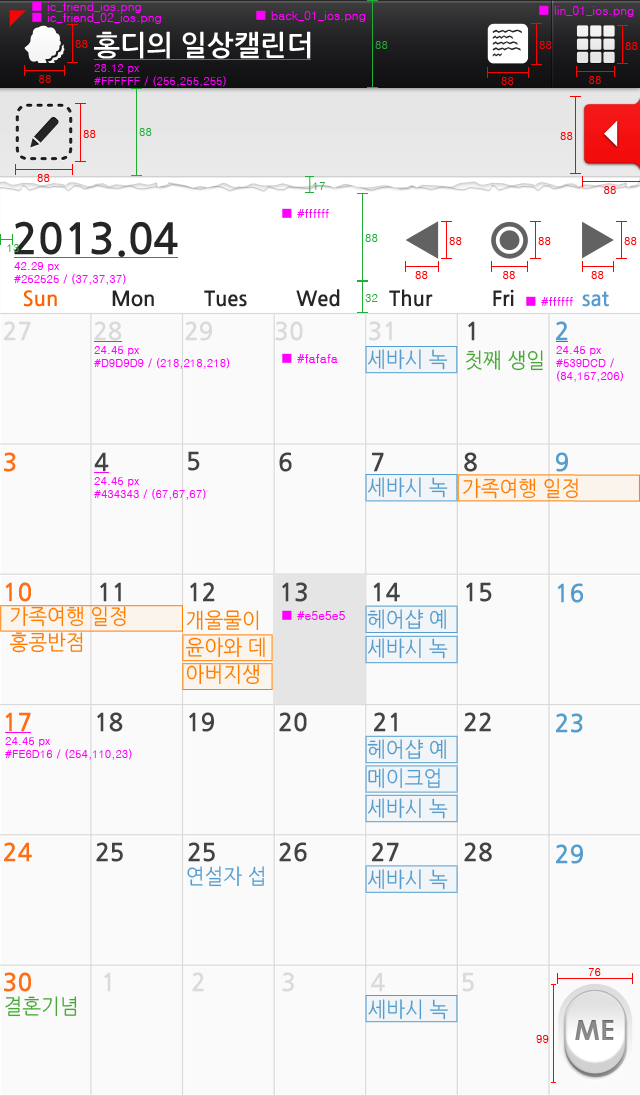
<style>
.page{position:relative;width:640px;height:1096px;background:#fafafa}
.page>*{position:absolute;margin:0}
.t1{font:12px "Dotum";color:#ff00ff}
.t2{font:11px "Dotum";color:#ff0000}
.t3{font:28.1px "NanumGothicBold";color:#ffffff}
.t4{font:11px "Dotum";color:#22ac38}
.t5{font:11px "Dotum";color:#ff00ff}
.t6{font:42.3px "NanumGothicBold";color:#252525}
.t7{font:20.4px "NanumGothicBold";color:#ff6000}
.t8{font:20.4px "NanumGothicBold";color:#252525}
.t9{font:20.4px "NanumGothicBold";color:#549dce}
.t10{font:24.4px "NanumGothicBold";color:#dadada}
.t11{font:24.4px "NanumGothicBold";color:#434343}
.t12{font:24.4px "NanumGothicBold";color:#549dce}
.t13{font:21px "NanumGothic";color:#549dce;scale:0.95 1}
.t14{font:21.1px "NanumGothic";color:#48a837;scale:0.95 1}
.t15{font:24.4px "NanumGothicBold";color:#fe6e17}
.t16{font:21.1px "NanumGothic";color:#ff7d00;scale:0.95 1}
.t17{font:21.1px/25.5px "NanumGothic";color:#ff7d00;scale:0.95 1}
.t18{font:21.1px/27px "NanumGothic";color:#ff7d00;scale:0.95 1}
.t19{font:21.1px/29.3px "NanumGothic";color:#549dce;scale:0.95 1}
.t20{font:21.1px "NanumGothic";color:#549dce;scale:0.95 1}
.t21{font:27.5px "CenturyGothic-Bold";letter-spacing:0.02em;color:#878787}
</style>
<div class="page">
<p class="t1" style="left:47px;top:2px;width:94px;height:11px">ic_friend_ios.png</p>
<p class="t1" style="left:554px;top:6px;width:80px;height:11px">lin_01_ios.png</p>
<p class="t1" style="left:47px;top:13px;width:114px;height:11px">ic_friend_02_ios.png</p>
<p class="t1" style="left:271px;top:11px;width:95px;height:11px">back_01_ios.png</p>
<p class="t2" style="left:75px;top:40px;width:13px;height:8px">88</p>
<p class="t3" style="left:94px;top:31px;width:217px;height:28px">홍디의 일상캘린더</p>
<p class="t4" style="left:375px;top:41px;width:13px;height:8px">88</p>
<p class="t2" style="left:539px;top:41px;width:13px;height:8px">88</p>
<p class="t2" style="left:625px;top:42px;width:13px;height:8px">88</p>
<p class="t5" style="left:94px;top:64px;width:132px;height:23px">28.12 px<br>#FFFFFF / (255,255,255)</p>
<p class="t2" style="left:39px;top:75px;width:12px;height:8px">88</p>
<p class="t2" style="left:501px;top:77px;width:13px;height:8px">88</p>
<p class="t2" style="left:589px;top:76px;width:12px;height:8px">88</p>
<p class="t2" style="left:83px;top:130px;width:13px;height:8px">88</p>
<p class="t4" style="left:139px;top:128px;width:13px;height:8px">88</p>
<p class="t2" style="left:560px;top:132px;width:13px;height:8px">88</p>
<p class="t2" style="left:37px;top:174px;width:13px;height:8px">88</p>
<p class="t4" style="left:313px;top:182px;width:12px;height:8px">17</p>
<p class="t2" style="left:604px;top:186px;width:12px;height:8px">88</p>
<p class="t1" style="left:297px;top:209px;width:32px;height:9px">#ffffff</p>
<p class="t6" style="left:14px;top:221px;width:164px;height:36px">2013.04</p>
<p class="t4" style="left:7px;top:244px;width:12px;height:8px">13</p>
<p class="t4" style="left:365px;top:234px;width:13px;height:8px">88</p>
<p class="t2" style="left:449px;top:237px;width:13px;height:8px">88</p>
<p class="t2" style="left:538px;top:237px;width:13px;height:8px">88</p>
<p class="t2" style="left:624px;top:237px;width:13px;height:8px">88</p>
<p class="t5" style="left:14px;top:262px;width:112px;height:23px">42.29 px<br>#252525 / (37,37,37)</p>
<p class="t2" style="left:415px;top:271px;width:13px;height:8px">88</p>
<p class="t2" style="left:503px;top:271px;width:12px;height:8px">88</p>
<p class="t2" style="left:591px;top:271px;width:13px;height:8px">88</p>
<p class="t7" style="left:24px;top:290px;width:33px;height:17px">Sun</p>
<p class="t8" style="left:112px;top:290px;width:42px;height:17px">Mon</p>
<p class="t8" style="left:204px;top:290px;width:43px;height:17px">Tues</p>
<p class="t8" style="left:296px;top:289px;width:44px;height:18px">Wed</p>
<p class="t4" style="left:365px;top:294px;width:13px;height:8px">32</p>
<p class="t8" style="left:389px;top:289px;width:44px;height:18px">Thur</p>
<p class="t8" style="left:493px;top:289px;width:21px;height:17px">Fri</p>
<p class="t9" style="left:582px;top:291px;width:27px;height:16px">sat</p>
<p class="t1" style="left:541px;top:297px;width:32px;height:9px">#ffffff</p>
<p class="t10" style="left:4px;top:321px;width:27px;height:20px">27</p>
<p class="t10" style="left:94px;top:321px;width:28px;height:20px">28</p>
<p class="t10" style="left:185px;top:321px;width:27px;height:20px">29</p>
<p class="t10" style="left:275px;top:321px;width:28px;height:20px">30</p>
<p class="t10" style="left:369px;top:321px;width:23px;height:20px">31</p>
<p class="t11" style="left:468px;top:321px;width:7px;height:20px">1</p>
<p class="t12" style="left:556px;top:321px;width:12px;height:20px">2</p>
<p class="t5" style="left:94px;top:346px;width:136px;height:23px">24.45 px<br>#D9D9D9 / (218,218,218)</p>
<p class="t13" style="left:368px;top:349px;width:79px;height:21px">세바시 녹</p>
<p class="t14" style="left:466px;top:350px;width:77px;height:21px">첫째 생일</p>
<p class="t5" style="left:556px;top:346px;width:67px;height:36px">24.45 px<br>#539DCD / <br>(84,157,206)</p>
<p class="t1" style="left:297px;top:354px;width:41px;height:9px">#fafafa</p>
<p class="t15" style="left:4px;top:452px;width:12px;height:20px">3</p>
<p class="t11" style="left:94px;top:452px;width:15px;height:20px">4</p>
<p class="t11" style="left:188px;top:451px;width:12px;height:20px">5</p>
<p class="t11" style="left:279px;top:452px;width:13px;height:20px">6</p>
<p class="t11" style="left:372px;top:452px;width:12px;height:20px">7</p>
<p class="t11" style="left:464px;top:452px;width:13px;height:20px">8</p>
<p class="t12" style="left:556px;top:452px;width:12px;height:20px">9</p>
<p class="t5" style="left:94px;top:477px;width:112px;height:23px">24.45 px<br>#434343 / (67,67,67)</p>
<p class="t13" style="left:368px;top:477px;width:80px;height:21px">세바시 녹</p>
<p class="t16" style="left:463px;top:478px;width:115px;height:21px">가족여행 일정</p>
<p class="t15" style="left:5px;top:582px;width:26px;height:20px">10</p>
<p class="t11" style="left:100px;top:582px;width:21px;height:20px">11</p>
<p class="t11" style="left:190px;top:582px;width:25px;height:20px">12</p>
<p class="t11" style="left:282px;top:582px;width:25px;height:20px">13</p>
<p class="t11" style="left:373px;top:582px;width:27px;height:20px">14</p>
<p class="t11" style="left:466px;top:582px;width:26px;height:20px">15</p>
<p class="t12" style="left:557px;top:583px;width:26px;height:20px">16</p>
<p class="t17" style="left:10px;top:606px;width:116px;height:47px">가족여행 일정<br>홍콩반점</p>
<p class="t18" style="left:186px;top:610px;width:79px;height:75px">개울물이<br>윤아와 데 <br>아버지생</p>
<p class="t1" style="left:297px;top:611px;width:48px;height:9px">#e5e5e5</p>
<p class="t19" style="left:367px;top:609px;width:81px;height:50px">헤어샵 예<br>세바시 녹</p>
<p class="t15" style="left:5px;top:712px;width:26px;height:20px">17</p>
<p class="t11" style="left:97px;top:712px;width:26px;height:20px">18</p>
<p class="t11" style="left:189px;top:712px;width:25px;height:20px">19</p>
<p class="t11" style="left:279px;top:712px;width:28px;height:20px">20</p>
<p class="t11" style="left:374px;top:712px;width:23px;height:20px">21</p>
<p class="t11" style="left:464px;top:712px;width:27px;height:20px">22</p>
<p class="t12" style="left:556px;top:713px;width:27px;height:20px">23</p>
<p class="t5" style="left:5px;top:737px;width:127px;height:23px">24.45 px<br>#FE6D16 / (254,110,23)</p>
<p class="t19" style="left:367px;top:739px;width:81px;height:80px">헤어샵 예<br>메이크업<br>세바시 녹</p>
<p class="t15" style="left:4px;top:842px;width:28px;height:20px">24</p>
<p class="t11" style="left:96px;top:842px;width:27px;height:20px">25</p>
<p class="t11" style="left:188px;top:842px;width:27px;height:20px">25</p>
<p class="t11" style="left:279px;top:842px;width:28px;height:20px">26</p>
<p class="t11" style="left:372px;top:842px;width:27px;height:20px">27</p>
<p class="t11" style="left:464px;top:842px;width:28px;height:20px">28</p>
<p class="t12" style="left:556px;top:844px;width:27px;height:20px">29</p>
<p class="t20" style="left:187px;top:866px;width:77px;height:21px">연설자 섭</p>
<p class="t20" style="left:368px;top:869px;width:80px;height:21px">세바시 녹</p>
<p class="t15" style="left:4px;top:972px;width:27px;height:20px">30</p>
<p class="t10" style="left:104px;top:972px;width:7px;height:20px">1</p>
<p class="t10" style="left:192px;top:972px;width:12px;height:20px">2</p>
<p class="t10" style="left:282px;top:972px;width:12px;height:20px">3</p>
<p class="t10" style="left:371px;top:972px;width:14px;height:20px">4</p>
<p class="t10" style="left:462px;top:972px;width:12px;height:20px">5</p>
<p class="t2" style="left:588px;top:968px;width:13px;height:8px">76</p>
<p class="t14" style="left:5px;top:996px;width:72px;height:21px">결혼기념</p>
<p class="t20" style="left:368px;top:999px;width:80px;height:21px">세바시 녹</p>
<p class="t21" style="left:575px;top:1020px;width:39px;height:20px">ME</p>
<p class="t2" style="left:536px;top:1035px;width:13px;height:8px">99</p>
</div>
